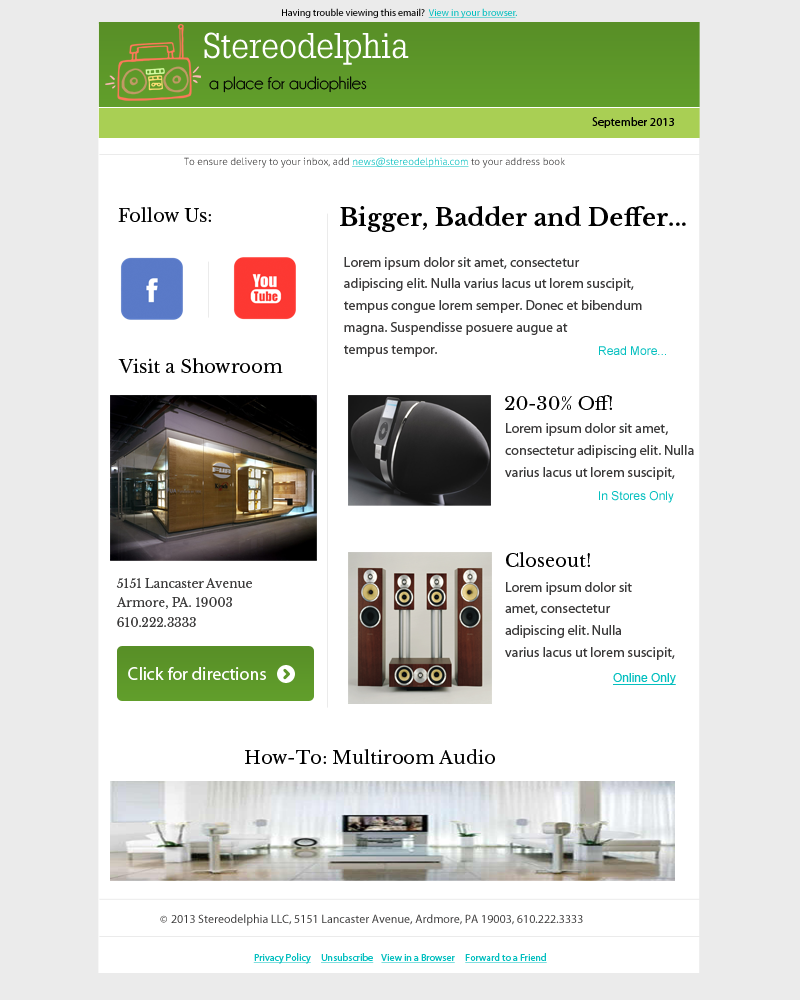
<style>
.page{position:relative;width:800px;height:1000px;background:#ffffff}
.page>*{position:absolute;margin:0}
.t1{font:10px "MyriadPro-Regular";color:#000000}
.t2{font:10px "MyriadPro-Regular";color:#04bfbf;text-decoration:underline}
.t3{font:10px "MyriadPro-Regular";color:#04bfbf}
.t4{font:36px "SlabTallX";color:#fcfcfc}
.t5{font:18px "Champagne&Limousines";color:#000000}
.t6{font:12px "MyriadPro-Regular";color:#000000}
.t7{font:10px "Aller-Light"}
.t8{font:10px "Aller-Light";text-decoration:underline}
.t9{font:18px "LibreBaskerville-Regular";color:#000000}
.t10{font:24px "LibreBaskerville-Bold";color:#000000}
.t11{font:14px "MyriadPro-Regular";color:#3b3a3a}
.t12{font:12px "ArialMT";color:#04bfbf}
.t13{font:12px "LibreBaskerville-Regular";color:#3b3a3a}
.t14{font:18px "MyriadPro-Regular";color:#ffffff}
.t15{font:12px "ArialMT";color:#04bfbf;text-decoration:underline}
.t16{font:12px "MyriadPro-Regular";color:#3b3a3a}
</style>
<div class="page">
<p class="t1" style="left:282px;top:8px;width:235px;height:11px">Having trouble viewing this email?  <span class="t2">View in your browser</span><span class="t3">.</span></p>
<p class="t4" style="left:204px;top:32px;width:205px;height:33px">Stereodelphia</p>
<p class="t5" style="left:209px;top:76px;width:158px;height:17px">a place for audiophiles</p>
<p class="t6" style="left:592px;top:117px;width:82px;height:11px">September 2013</p>
<p class="t7" style="left:184px;top:157px;width:381px;height:11px">To ensure delivery to your inbox, add <span class="t8">news@stereodelphia.com</span> to your address book</p>
<p class="t9" style="left:118px;top:207px;width:93px;height:15px">Follow Us:</p>
<p class="t10" style="left:340px;top:206px;width:346px;height:26px">Bigger, Badder and Deffer...</p>
<p class="t11" style="left:344px;top:257px;width:298px;height:100px">Lorem ipsum dolor sit amet, consectetur <br>adipiscing elit. Nulla varius lacus ut lorem suscipit, <br>tempus congue lorem semper. Donec et bibendum <br>magna. Suspendisse posuere augue at <br>tempus tempor.</p>
<p class="t12" style="left:599px;top:346px;width:67px;height:9px">Read More...</p>
<p class="t9" style="left:118px;top:358px;width:165px;height:15px">Visit a Showroom</p>
<p class="t9" style="left:505px;top:395px;width:107px;height:15px">20-30% Off!</p>
<p class="t11" style="left:505px;top:423px;width:189px;height:57px">Lorem ipsum dolor sit amet, <br>consectetur adipiscing elit. Nulla <br>varius lacus ut lorem suscipit,</p>
<p class="t12" style="left:599px;top:491px;width:75px;height:12px">In Stores Only</p>
<p class="t9" style="left:506px;top:552px;width:84px;height:15px">Closeout!</p>
<p class="t13" style="left:116px;top:578px;width:136px;height:49px">5151 Lancaster Avenue<br>Armore, PA. 19003<br>610.222.3333</p>
<p class="t11" style="left:505px;top:582px;width:170px;height:78px">Lorem ipsum dolor sit <br>amet, consectetur <br>adipiscing elit. Nulla <br>varius lacus ut lorem suscipit,</p>
<p class="t14" style="left:128px;top:667px;width:138px;height:13px">Click for directions</p>
<p class="t15" style="left:613px;top:673px;width:63px;height:12px">Online Only</p>
<p class="t9" style="left:245px;top:749px;width:250px;height:15px">How-To: Multiroom Audio</p>
<p class="t16" style="left:171px;top:914px;width:412px;height:12px">2013 Stereodelphia LLC, 5151 Lancaster Avenue, Ardmore, PA 19003, 610.222.3333</p>
<p class="t2" style="left:253px;top:953px;width:294px;height:11px">Privacy Policy     Unsubscribe    View in a Browser     Forward to a Friend</p>
</div>
